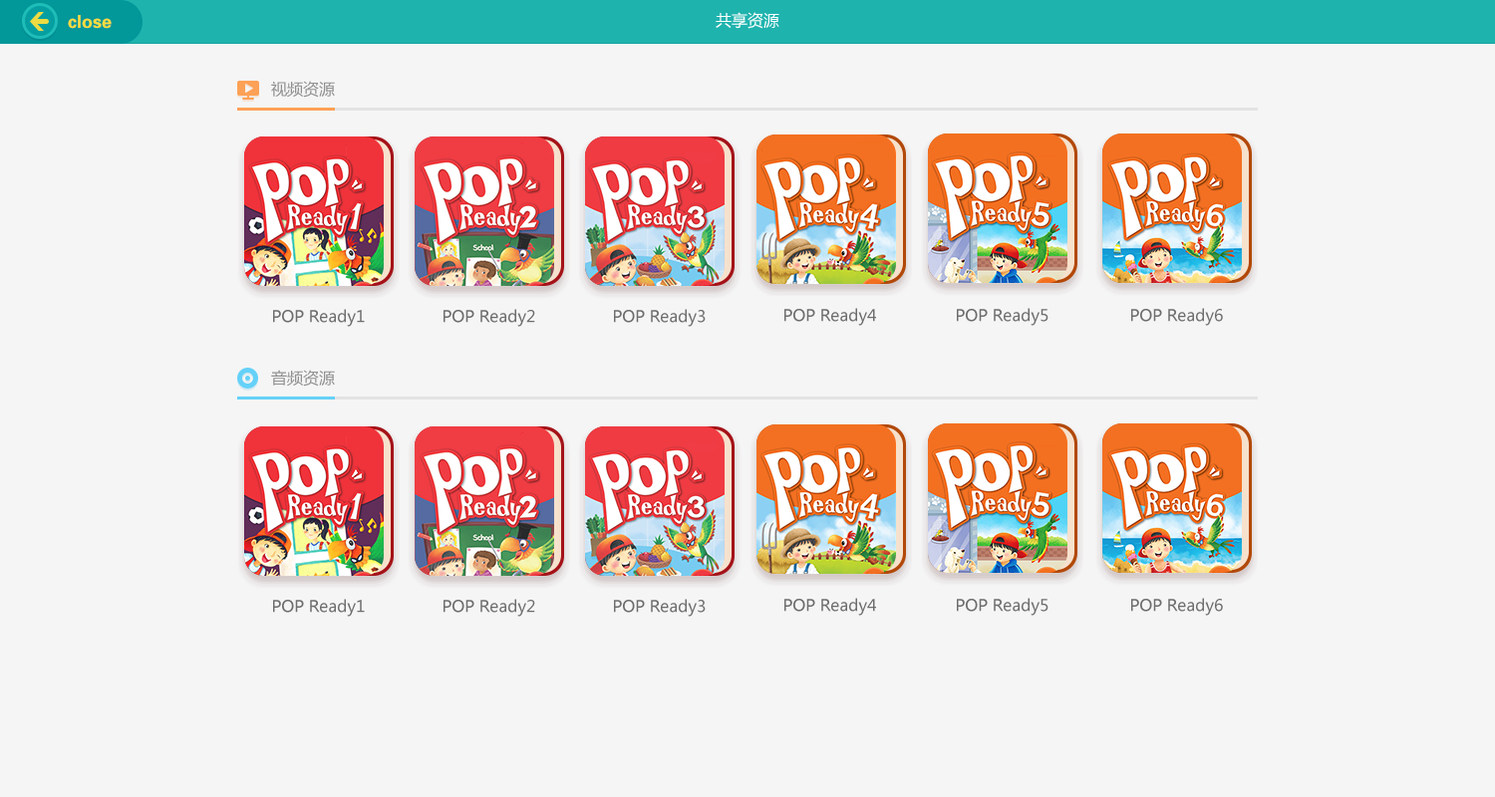
<style>
.page{position:relative;width:1495px;height:797px;background:#f5f5f5}
.page>*{position:absolute;margin:0}
.t1{font:15.9px "MicrosoftYaHei";color:#ffffff}
.t2{font:15.9px "MicrosoftYaHei";color:#909090}
.t3{font:15.9px "MicrosoftYaHei";color:#6d6d6d}
</style>
<div class="page">
<p class="t1" style="left:716px;top:12px;width:64px;height:17px">共享资源</p>
<p class="t2" style="left:271px;top:81px;width:64px;height:17px">视频资源</p>
<p class="t3" style="left:273px;top:309px;width:92px;height:18px">POP Ready1</p>
<p class="t3" style="left:444px;top:309px;width:91px;height:18px">POP Ready2</p>
<p class="t3" style="left:614px;top:309px;width:92px;height:18px">POP Ready3</p>
<p class="t3" style="left:785px;top:308px;width:91px;height:18px">POP Ready4</p>
<p class="t3" style="left:957px;top:308px;width:92px;height:18px">POP Ready5</p>
<p class="t3" style="left:1131px;top:308px;width:92px;height:18px">POP Ready6</p>
<p class="t2" style="left:271px;top:370px;width:64px;height:17px">音频资源</p>
<p class="t3" style="left:273px;top:599px;width:92px;height:18px">POP Ready1</p>
<p class="t3" style="left:444px;top:599px;width:91px;height:18px">POP Ready2</p>
<p class="t3" style="left:614px;top:599px;width:92px;height:18px">POP Ready3</p>
<p class="t3" style="left:785px;top:598px;width:91px;height:18px">POP Ready4</p>
<p class="t3" style="left:957px;top:598px;width:92px;height:18px">POP Ready5</p>
<p class="t3" style="left:1131px;top:598px;width:92px;height:18px">POP Ready6</p>
</div>
